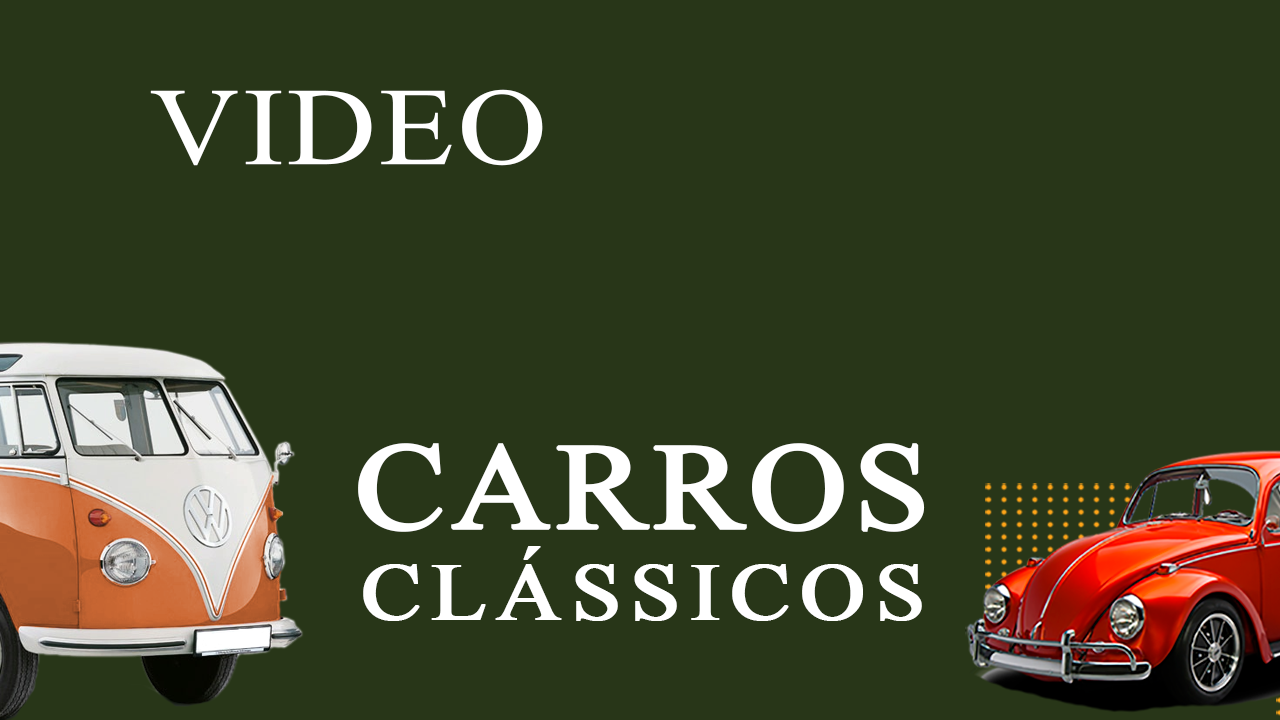
<style>
.page{position:relative;width:1280px;height:720px;background:#283618}
.page>*{position:absolute;margin:0}
.t1{font:111.1px "TimesNewRomanPSMT";color:#ffffff;text-transform:uppercase;font-weight:bold;scale:1.11 1}
.t2{font:122.4px "TimesNewRomanPSMT";letter-spacing:0.02em;color:#ffffff;text-transform:uppercase;font-weight:bold;scale:1.11 1}
.t3{font:81.6px "TimesNewRomanPSMT";letter-spacing:0.08em;color:#ffffff;text-transform:uppercase;font-weight:bold;scale:1.11 1}
</style>
<div class="page">
<p class="t1" style="left:150px;top:89px;width:393px;height:77px">VIDEO</p>
<p class="t2" style="left:358px;top:443px;width:567px;height:89px">CARROS</p>
<p class="t3" style="left:363px;top:546px;width:559px;height:75px">CLÁSSICOS</p>
</div>
